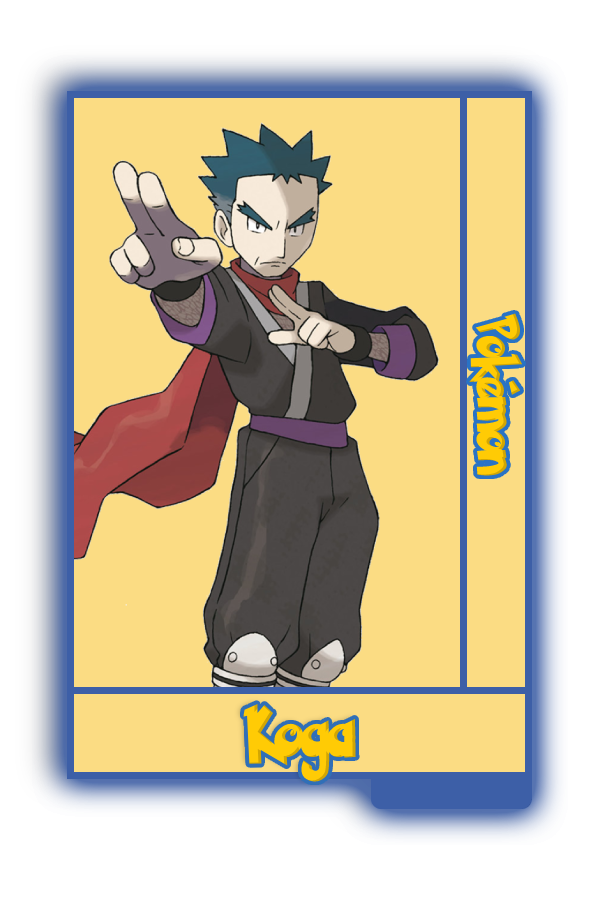
<style>
.page{position:relative;width:600px;height:900px;background:#fbdc83}
.page>*{position:absolute;margin:0}
.t1{font:48.8px "PokemonSolidNormal";color:#ffcb05;scale:0.8 1}
.t2{font:56.6px "PokemonSolidNormal";color:#ffcb05;scale:0.92 1}
</style>
<div class="page">
<p class="t1" style="left:469px;top:313px;width:54px;height:163px;rotate:90deg">Pokémon</p>
<p class="t2" style="left:243px;top:703px;width:113px;height:79px">Koga</p>
</div>
